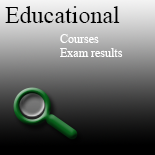
<style>
.page{position:relative;width:155px;height:155px}
.page>*{position:absolute;margin:0}
.t1{font:24px "TimesNewRomanPSMT";color:#000000}
.t2{font:12px "TimesNewRomanPSMT";color:#ffffff}
</style>
<div class="page">
<p class="t1" style="left:5px;top:6px;width:115px;height:17px">Educational</p>
<p class="t2" style="left:60px;top:34px;width:63px;height:23px">Courses<br>Exam results</p>
</div>
